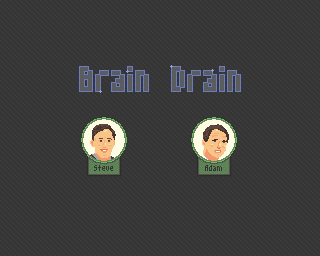
<style>
.page{position:relative;width:320px;height:256px;background:#353535}
.page>*{position:absolute;margin:0}
.t1{font:64px "m3x6";color:#5a5c5e}
.t2{font:16px "m3x6";color:#353535}
</style>
<div class="page">
<p class="t1" style="left:80px;top:67px;width:160px;height:24px">Brain Drain</p>
<p class="t2" style="left:94px;top:165px;width:19px;height:6px">Steve</p>
<p class="t2" style="left:205px;top:165px;width:17px;height:6px">Adam</p>
</div>
